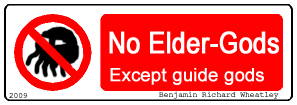
<style>
.page{position:relative;width:297px;height:105px;background:#ffffff}
.page>*{position:absolute;margin:0}
.t1{font:29.9px "ArialNarrow";color:#ffffff;font-weight:bold}
.t2{font:17.9px "ArialMT";color:#ffffff;font-weight:bold}
.t3{font:8px "Courier"}
</style>
<div class="page">
<p class="t1" style="left:109px;top:31px;width:170px;height:23px">No Elder-Gods</p>
<p class="t2" style="left:110px;top:68px;width:154px;height:17px">Except guide gods</p>
<p class="t3" style="left:9px;top:93px;width:18px;height:5px">2009</p>
<p class="t3" style="left:159px;top:91px;width:120px;height:8px">Benjamin Richard Wheatley</p>
</div>
